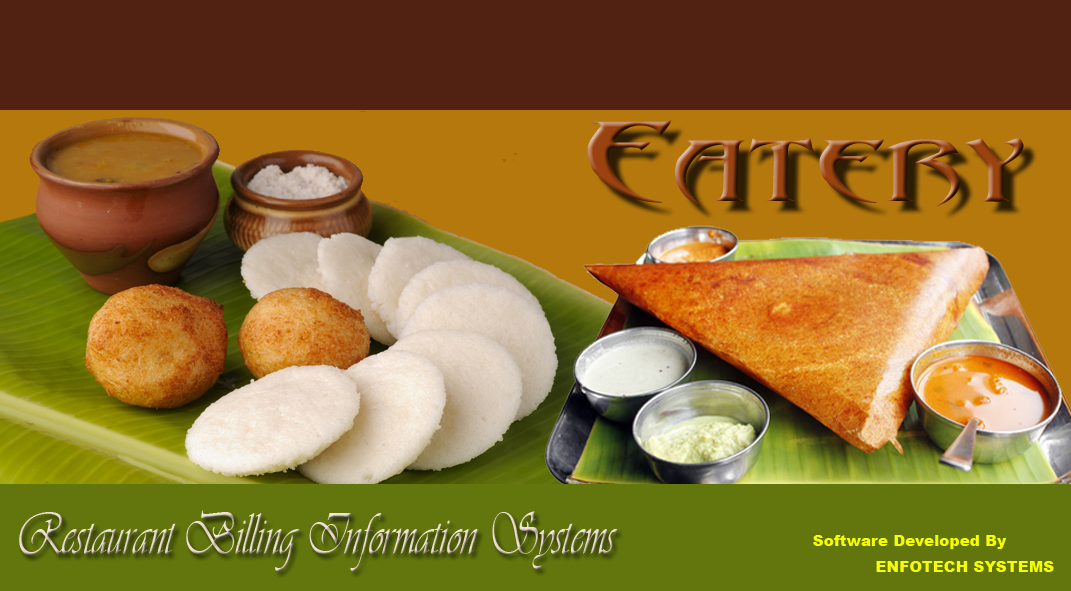
<style>
.page{position:relative;width:1071px;height:591px}
.page>*{position:absolute;margin:0}
.t1{font:101.4px "Abaddon";scale:1.6 1}
.t2{font:61.1px "Vivaldii";color:#e8d8c9;scale:0.68 1}
.t3{font:15.3px "Arial-Black";color:#f5fe02}
</style>
<div class="page">
<p class="t1" style="left:587px;top:120px;width:437px;height:87px">Eatery</p>
<p class="t2" style="left:19px;top:510px;width:599px;height:61px">Restaurant Billing Information Systems</p>
<p class="t3" style="left:813px;top:535px;width:194px;height:14px">Software Developed By</p>
<p class="t3" style="left:876px;top:561px;width:178px;height:11px">ENFOTECH SYSTEMS</p>
</div>
